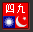
<style>
.page{position:relative;width:33px;height:32px;background:#333333}
.page>*{position:absolute;margin:0}
.t1{font:10.4px "SimSun";color:#ffffff}
</style>
<div class="page">
<p class="t1" style="left:6px;top:4px;width:19px;height:9px">四九</p>
</div>
